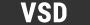
<style>
.page{position:relative;width:90px;height:25px;background:#333333}
.page>*{position:absolute;margin:0}
.t1{font:27px "RobotoCondensed-Bold";color:#ffffff;font-weight:bold}
</style>
<div class="page">
<p class="t1" style="left:20px;top:2px;width:47px;height:21px">VSD</p>
</div>
